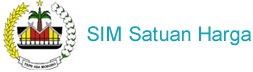
<style>
.page{position:relative;width:253px;height:72px;background:#ffffff}
.page>*{position:absolute;margin:0}
.t1{font:20px "ArialMT";color:#17a2b8}
</style>
<div class="page">
<p class="t1" style="left:87px;top:26px;width:164px;height:20px">SIM Satuan Harga</p>
</div>
